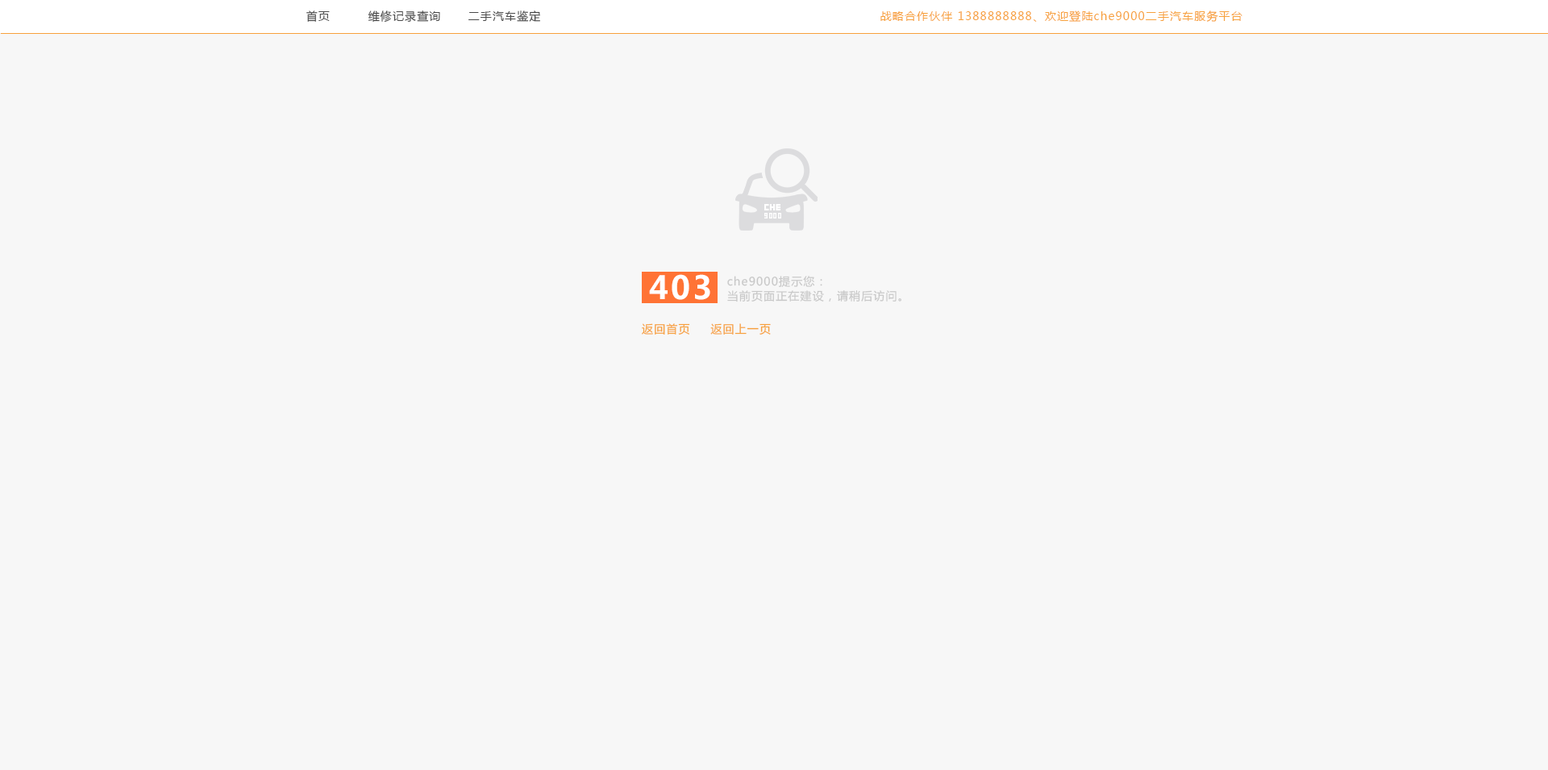
<style>
.page{position:relative;width:1548px;height:770px;background:#f7f7f7}
.page>*{position:absolute;margin:0}
.t1{font:11.3px "MicrosoftYaHei";letter-spacing:0.08em;color:#494949}
.t2{font:11.3px "MicrosoftYaHei";letter-spacing:0.08em;color:#f7a13c}
.t3{font:31.7px "MicrosoftYaHei-Bold";letter-spacing:0.08em;color:#ffffff}
.t4{font:11.4px "MicrosoftYaHei";letter-spacing:0.08em;color:#c8c8c8}
.t5{font:11.4px "MicrosoftYaHei";letter-spacing:0.08em;color:#f7a13c}
</style>
<div class="page">
<p class="t1" style="left:306px;top:10px;width:24px;height:12px">首页</p>
<p class="t1" style="left:368px;top:10px;width:72px;height:13px">维修记录查询</p>
<p class="t1" style="left:469px;top:10px;width:71px;height:12px">二手汽车鉴定</p>
<p class="t2" style="left:881px;top:10px;width:362px;height:12px">战略合作伙伴 1388888888、欢迎登陆che9000二手汽车服务平台</p>
<p class="t3" style="left:649px;top:274px;width:61px;height:26px">403</p>
<p class="t4" style="left:727px;top:276px;width:96px;height:11px">che9000提示您：</p>
<p class="t4" style="left:727px;top:290px;width:175px;height:12px">当前页面正在建设，请稍后访问。</p>
<p class="t5" style="left:642px;top:323px;width:48px;height:12px">返回首页</p>
<p class="t5" style="left:710px;top:323px;width:61px;height:12px">返回上一页</p>
</div>
